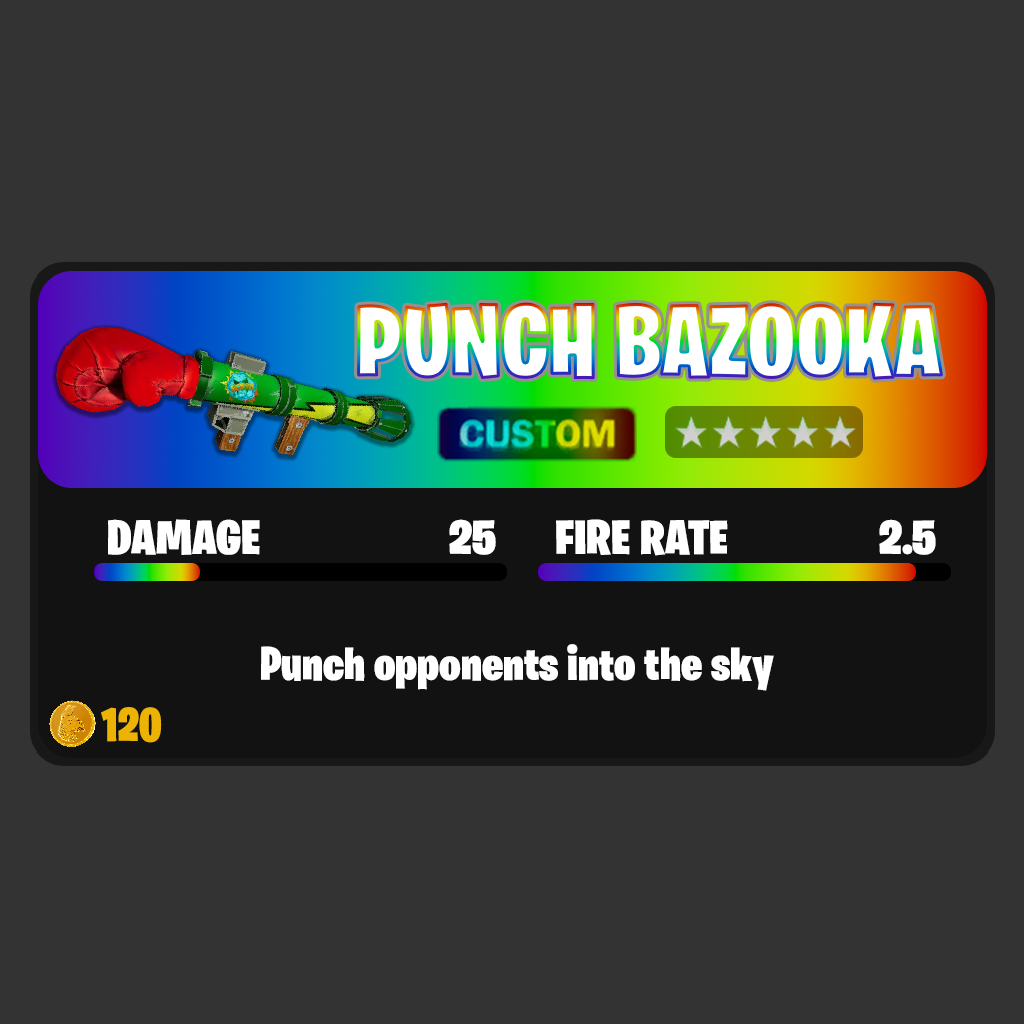
<style>
.page{position:relative;width:1024px;height:1024px;background:#333333}
.page>*{position:absolute;margin:0}
.t1{font:100.8px "BurbankBigCondensed-Black";color:#ffffff}
.t2{font:48.4px "BurbankBigCondensed-Black";color:#ffffff;scale:1.1 1}
.t3{font:48.3px "BurbankBigCondensed-Black";color:#ffffff;scale:1.1 1}
.t4{font:48px "BurbankBigCondensed-Black";color:#ffffff}
.t5{font:48px "BurbankBigCondensed-Black";color:#ecb304}
</style>
<div class="page">
<p class="t1" style="left:358px;top:303px;width:584px;height:76px">PUNCH BAZOOKA</p>
<p class="t2" style="left:108px;top:519px;width:152px;height:36px">DAMAGE</p>
<p class="t2" style="left:449px;top:519px;width:47px;height:36px">25</p>
<p class="t3" style="left:556px;top:519px;width:172px;height:37px">FIRE RATE</p>
<p class="t3" style="left:879px;top:519px;width:57px;height:36px">2.5</p>
<p class="t4" style="left:261px;top:644px;width:513px;height:47px">Punch opponents into the sky</p>
<p class="t5" style="left:101px;top:707px;width:61px;height:36px">120</p>
</div>
